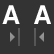
<style>
.page{position:relative;width:54px;height:54px;background:#333333}
.page>*{position:absolute;margin:0}
.t1{font:26px "Helvetica-Bold";color:#ffffff}
</style>
<div class="page">
<p class="t1" style="left:2px;top:5px;width:49px;height:19px">A  A</p>
</div>
